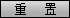
<style>
.page{position:relative;width:70px;height:18px;background:#000000}
.page>*{position:absolute;margin:0}
.t1{font:12px "SimSun";color:#000000}
</style>
<div class="page">
<p class="t1" style="left:15px;top:3px;width:41px;height:12px">重   置</p>
</div>
